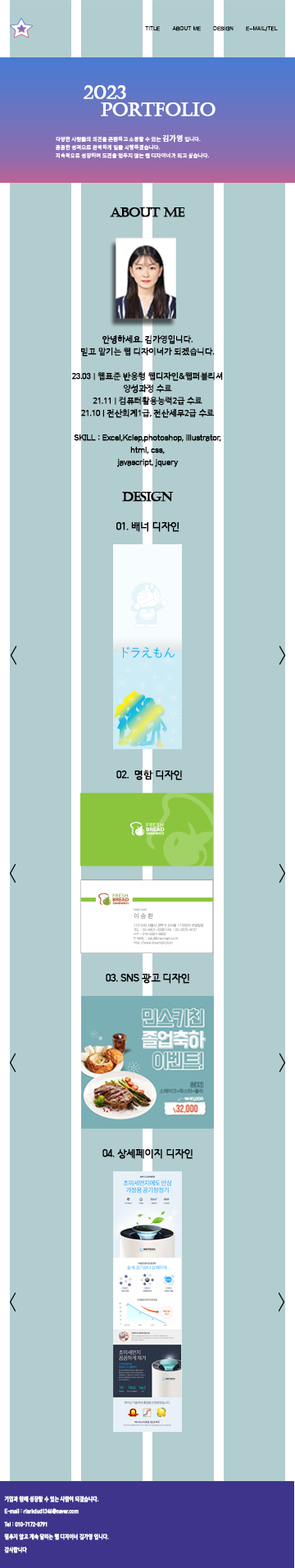
<style>
.page{position:relative;width:295px;height:1568px;background:#b2cdcf}
.page>*{position:absolute;margin:0}
.t1{font:5.2px "Gulim";color:#000000;font-weight:bold}
.t2{font:17.7px "Castellar";color:#ffffff;font-weight:bold}
.t3{font:5.2px/8.3px "NotoSansKR-Light";color:#ffffff;font-weight:bold}
.t4{font:7.4px/8.3px "NotoSansKR-Medium";color:#ffffff;font-weight:bold}
.t5{font:13.1px "Castellar";letter-spacing:-0.06em;color:#000000;font-weight:bold}
.t6{font:8.2px/12.3px "HCRDotum";letter-spacing:-0.06em;color:#000000;font-weight:bold}
.t7{font:9.8px "HCRDotum";letter-spacing:-0.06em;color:#000000;font-weight:bold}
.t8{font:5.7px/4.3px "HCRDotum";color:#ffffff;font-weight:bold;scale:0.78 1}
.t9{font:5.7px/4.3px "HCRDotum-Bold";color:#ffffff;font-weight:bold;scale:0.78 1}
</style>
<div class="page">
<p class="t1" style="left:145px;top:26px;width:15px;height:5px">TITLE</p>
<p class="t1" style="left:172px;top:26px;width:29px;height:5px">ABOUT ME</p>
<p class="t1" style="left:213px;top:26px;width:21px;height:5px">DESIGN</p>
<p class="t1" style="left:246px;top:25px;width:32px;height:6px">E-MAIL/TEL</p>
<p class="t2" style="left:84px;top:85px;width:42px;height:14px">2023</p>
<p class="t2" style="left:101px;top:102px;width:115px;height:14px">PORTFOLIO</p>
<p class="t3" style="left:55px;top:134px;width:154px;height:25px">다양한 사람들의 의견을 존중하고 소통할 수 있는 <span class="t4">김가영</span> 입니다.<br>꼼꼼한 성격으로 완벽하게 일을 시행하겠습니다.<br>지속적으로 성장하며 도전을 멈추지 않는 웹 디자이너가 되고 싶습니다.</p>
<p class="t5" style="left:110px;top:207px;width:75px;height:10px">ABOUT ME</p>
<p class="t6" style="left:71px;top:335px;width:152px;height:132px;text-align:center">안녕하세요. 김가영입니다.<br>믿고 맡기는 웹 디자이너가 되겠습니다.<br><br>23.03 | 웹표준 반응형 웹디자인&amp;웹퍼블리셔 양성과정 수료  <br>21.11 | 컴퓨터활용능력2급 수료 <br>21.10 | 전산회계1급, 전산세무2급 수료<br><br>SKILL : Excel,Kclep,photoshop, illustrator, html, css, <br>javascript, jquery</p>
<p class="t5" style="left:122px;top:492px;width:52px;height:10px">DESIGN</p>
<p class="t7" style="left:116px;top:522px;width:64px;height:10px">01. 배너 디자인</p>
<p class="t7" style="left:116px;top:770px;width:66px;height:10px">02.  명함 디자인</p>
<p class="t7" style="left:106px;top:974px;width:83px;height:10px">03. SNS 광고 디자인</p>
<p class="t7" style="left:102px;top:1149px;width:91px;height:10px">04. 상세페이지 디자인</p>
<p class="t8" style="left:4px;top:1496px;width:105px;height:57px"><span class="t9">기업과 함께 성장할 수 있는 사람이 되겠습니다.<br><br><br></span>E-mail : rlarkdud1346@naver.com<br><br><br>Tel : 010-7172-8791<br><br><br>멈추지 않고 계속 달리는 웹 디자이너 김가영 입니다.<br><br><br>감사합니다</p>
</div>
